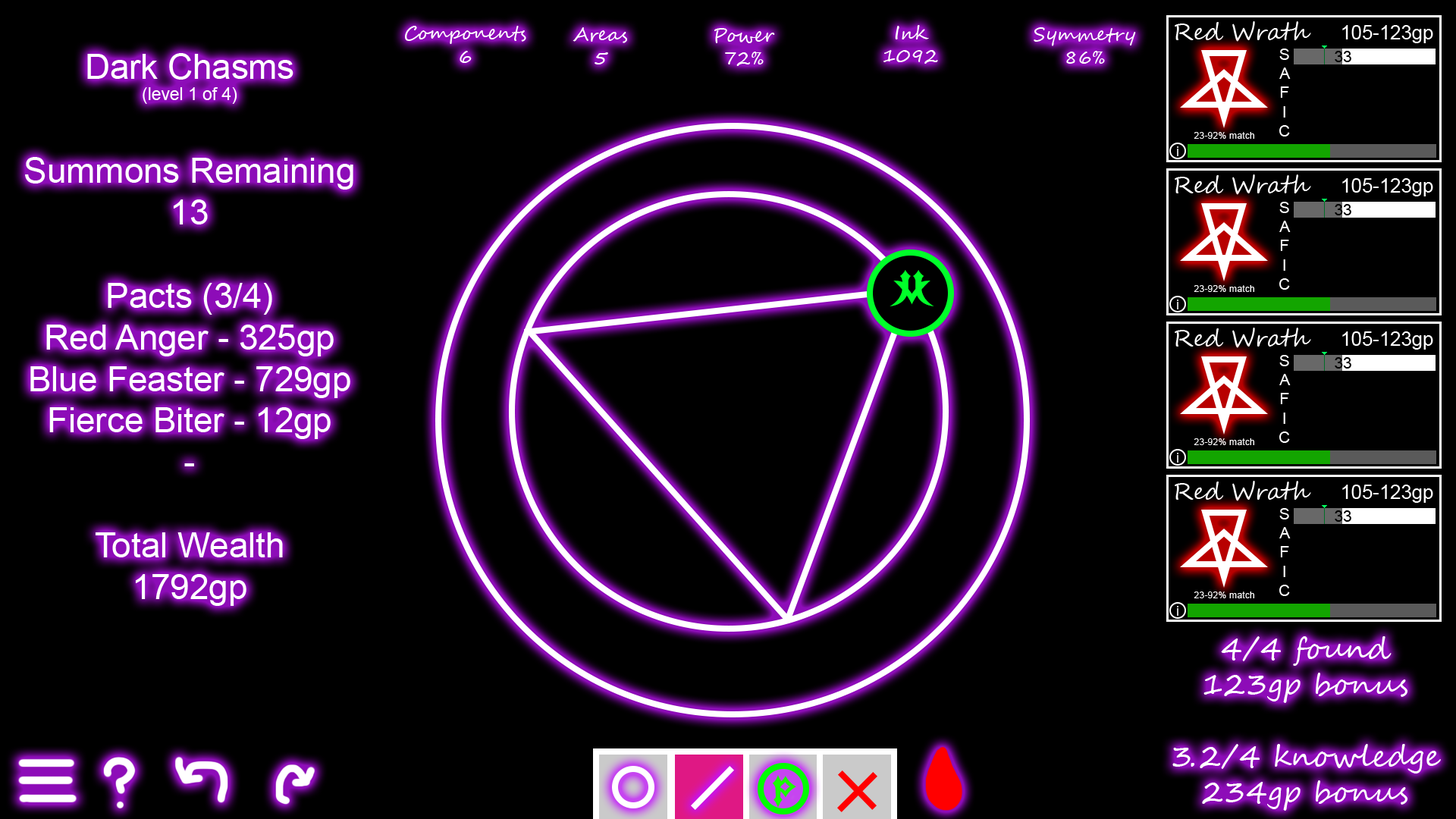
<style>
.page{position:relative;width:1456px;height:819px;background:#000000}
.page>*{position:absolute;margin:0}
.t1{font:34.7px "ArialMT";color:#ffffff}
.t2{font:17.3px "ArialMT";color:#ffffff}
.t3{font:49.3px "KHScala-Regular";color:#00ff2a}
.t4{font:29.9px "SegoeScript";color:#ffffff}
.t5{font:36.4px "KHScala-Regular";color:#18ff00}
</style>
<div class="page">
<p class="t1" style="left:25px;top:53px;width:328px;height:553px;text-align:center">Dark Chasms<br><span class="t2">(level 1 of 4)<br></span><br>Summons Remaining<br>13<br><br>Pacts (3/4)<br>Red Anger - 325gp<br>Blue Feaster - 729gp<br>Fierce Biter - 12gp<br>-<br><br>Total Wealth<br>1792gp</p>
<p class="t3" style="left:890px;top:270px;width:43px;height:36px">A</p>
<p class="t4" style="left:1172px;top:636px;width:269px;height:175px;text-align:center">4/4 found<br>123gp bonus<br><br>3.2/4 knowledge<br>234gp bonus</p>
<p class="t5" style="left:772px;top:775px;width:24px;height:33px">B</p>
</div>
